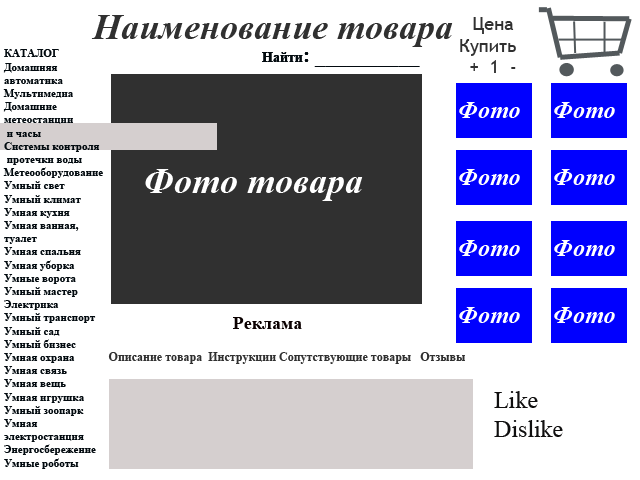
<style>
.page{position:relative;width:640px;height:480px;background:#ffffff}
.page>*{position:absolute;margin:0}
.t1{font:36px "TimesNewRomanPS-BoldItalicMT";color:#303030}
.t2{font:18px "TrebuchetMS";color:#303030}
.t3{font:11px "TimesNewRomanPS-BoldMT";color:#020a0f}
.t4{font:20.8px "TimesNewRomanPS-BoldMT";color:#020a0f}
.t5{font:14px "TimesNewRomanPS-BoldMT";color:#020a0f}
.t6{font:36px "TimesNewRomanPS-BoldItalicMT";color:#ffffff}
.t7{font:36px "TimesNewRomanPS-BoldItalicMT";color:#050505}
.t8{font:18px "TimesNewRomanPS-BoldMT";color:#0b0101}
.t9{font:12px "TimesNewRomanPS-BoldMT";color:#303030}
.t10{font:24px "TimesNewRomanPSMT";color:#100f0f}
</style>
<div class="page">
<p class="t1" style="left:91px;top:15px;width:362px;height:32px">Наименование товара</p>
<p class="t2" style="left:460px;top:17px;width:56px;height:56px;text-align:center">Цена<br>Купить  <br>+  1  -</p>
<p class="t3" style="left:3px;top:49px;width:100px;height:420px">КАТАЛОГ<br>Домашняя <br>автоматика<br>Мультимедиа<br>Домашние <br>метеостанции<br> и часы<br>Системы контроля<br> протечки воды<br>Метеооборудование<br>Умный свет<br>Умный климат<br>Умная кухня<br>Умная ванная, <br>туалет<br>Умная спальня<br>Умная уборка<br>Умные ворота<br>Умный мастер<br>Электрика<br>Умный транспорт<br>Умный сад<br>Умный бизнес<br>Умная охрана<br>Умная связь<br>Умная вещь<br>Умная игрушка<br>Умный зоопарк<br>Умная <br>электростанция<br>Энергосбережение<br>Умные роботы</p>
<p class="t4" style="left:262px;top:52px;width:158px;height:15px"><span class="t5">Найти</span>: __________</p>
<p class="t4" style="left:262px;top:52px;width:158px;height:15px"><span class="t5">Найти</span>: __________</p>
<p class="t6" style="left:145px;top:169px;width:218px;height:32px"><span class="t7"><br><br><br></span>Фото товара</p>
<p class="t8" style="left:233px;top:317px;width:69px;height:12px">Реклама</p>
<p class="t9" style="left:108px;top:352px;width:357px;height:12px">Описание товара  Инструкции Сопутствующие товары   Отзывы</p>
<p class="t10" style="left:494px;top:391px;width:69px;height:46px">Like<br>Dislike</p>
</div>
